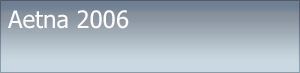
<style>
.page{position:relative;width:300px;height:73px}
.page>*{position:absolute;margin:0}
.t1{font:24px "Tahoma";color:#fdfdfe}
</style>
<div class="page">
<p class="t1" style="left:8px;top:10px;width:121px;height:19px">Aetna 2006</p>
</div>
